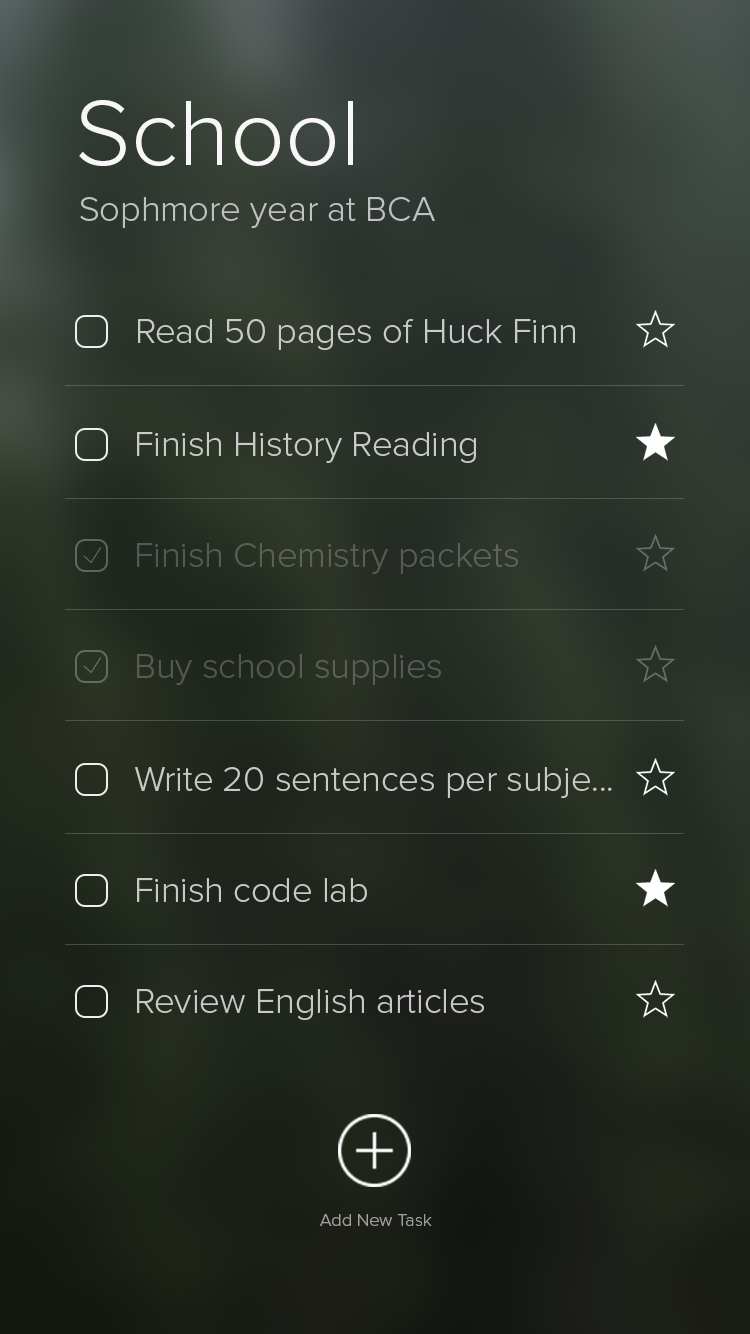
<style>
.page{position:relative;width:750px;height:1334px}
.page>*{position:absolute;margin:0}
.t1{font:96px "ProximaNova-Light";color:#f7f7f7}
.t2{font:36px "ProximaNova-Light";color:#cccccc}
.t3{font:36px "ProximaNova-Light";color:#c9cac9}
.t4{font:36px "ProximaNova-Light";color:#585e56}
.t5{font:36px "ProximaNova-Light";color:#565b53}
.t6{font:36px "ProximaNova-Light";color:#c8c9c8}
.t7{font:36px "ProximaNova-Light";color:#c8c9c7}
.t8{font:36px "ProximaNova-Light";color:#c8c8c7}
.t9{font:18px "ProximaNova-Light";color:#9fa09d}
</style>
<div class="page">
<p class="t1" style="left:79px;top:100px;width:274px;height:66px">School</p>
<p class="t2" style="left:80px;top:197px;width:355px;height:31px;opacity:0.9">Sophmore year at BCA</p>
<p class="t3" style="left:138px;top:319px;width:437px;height:31px">Read 50 pages of Huck Finn</p>
<p class="t3" style="left:137px;top:432px;width:339px;height:31px">Finish History Reading</p>
<p class="t4" style="left:137px;top:543px;width:381px;height:31px">Finish Chemistry packets</p>
<p class="t5" style="left:137px;top:654px;width:304px;height:31px">Buy school supplies</p>
<p class="t6" style="left:135px;top:767px;width:477px;height:31px">Write 20 sentences per subje...</p>
<p class="t7" style="left:137px;top:878px;width:230px;height:24px">Finish code lab</p>
<p class="t8" style="left:137px;top:989px;width:347px;height:31px">Review English articles</p>
<p class="t9" style="left:320px;top:1214px;width:112px;height:12px">Add New Task</p>
</div>
